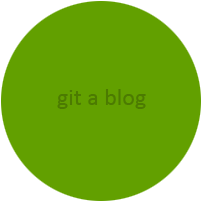
<style>
.page{position:relative;width:202px;height:202px;background:#62a000}
.page>*{position:absolute;margin:0}
.t1{font:24px "Calibri";color:#528501}
</style>
<div class="page">
<p class="t1" style="left:57px;top:89px;width:89px;height:20px">git a blog</p>
</div>
